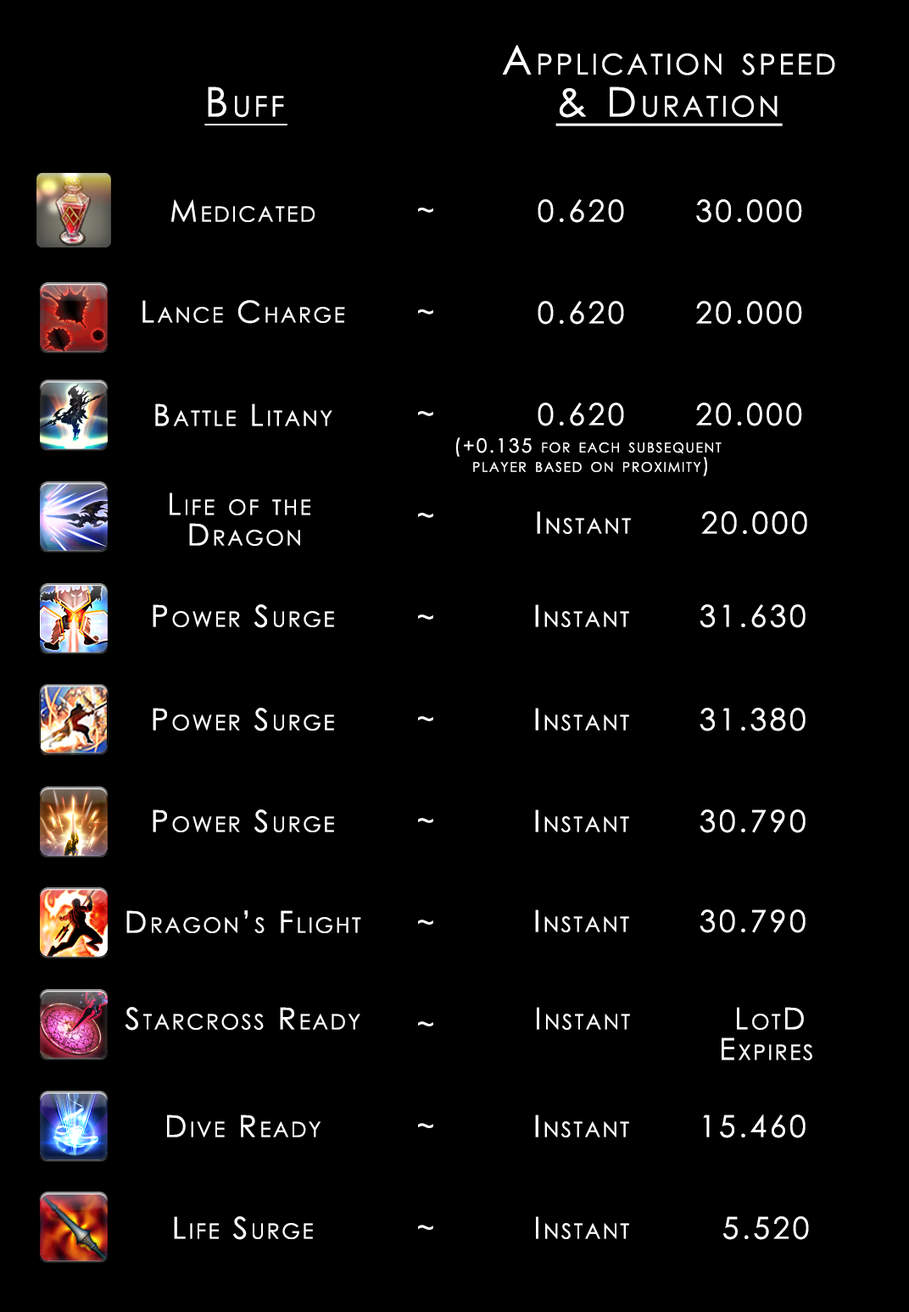
<style>
.page{position:relative;width:909px;height:1312px;background:#000000}
.page>*{position:absolute;margin:0}
.t1{font:40.7px "CenturyGothic";letter-spacing:0.1em;color:#ffffff;font-variant:small-caps}
.t2{font:40.7px "CenturyGothic";letter-spacing:0.1em;color:#ffffff;font-variant:small-caps;text-decoration:underline}
.t3{font:30.1px "CenturyGothic";letter-spacing:0.1em;color:#ffffff;font-variant:small-caps}
.t4{font:30.1px/14.5px "CenturyGothic";letter-spacing:0.1em;color:#ffffff;font-variant:small-caps}
.t5{font:19.2px/19.5px "CenturyGothic";letter-spacing:0.1em;color:#ffffff;font-variant:small-caps}
.t6{font:30.1px/30.5px "CenturyGothic";letter-spacing:0.1em;color:#ffffff;font-variant:small-caps}
</style>
<div class="page">
<p class="t1" style="left:502px;top:45px;width:333px;height:30px">Application speed</p>
<p class="t2" style="left:204px;top:86px;width:83px;height:39px">Buff</p>
<p class="t2" style="left:555px;top:86px;width:227px;height:40px">&amp; Duration</p>
<p class="t3" style="left:171px;top:199px;width:143px;height:23px">Medicated</p>
<p class="t4" style="left:418px;top:208px;width:15px;height:1022px;text-align:center">~<br><br><br><br><br><br><br>~<br><br><br><br><br><br><br>~<br><br><br><br><br><br><br>~<br><br><br><br><br><br><br>~<br><br><br><br><br><br><br>~<br><br><br><br><br><br><br>~<br><br><br><br><br><br><br>~<br><br><br><br><br><br><br>~<br><br><br><br><br><br><br>~<br><br><br><br><br><br><br>~</p>
<p class="t3" style="left:537px;top:199px;width:265px;height:24px">0.620      30.000</p>
<p class="t3" style="left:142px;top:300px;width:203px;height:24px">Lance Charge</p>
<p class="t3" style="left:537px;top:301px;width:265px;height:24px">0.620      20.000</p>
<p class="t3" style="left:155px;top:403px;width:177px;height:23px">Battle Litany</p>
<p class="t3" style="left:537px;top:403px;width:265px;height:23px">0.620      20.000</p>
<p class="t5" style="left:456px;top:437px;width:265px;height:39px;text-align:center">(+0.135 for each subsequent <br>player based on proximity)</p>
<p class="t6" style="left:170px;top:493px;width:140px;height:53px;text-align:center">Life of the <br>Dragon</p>
<p class="t3" style="left:537px;top:511px;width:270px;height:24px">Instant      20.000</p>
<p class="t3" style="left:153px;top:604px;width:181px;height:24px">Power Surge</p>
<p class="t3" style="left:535px;top:604px;width:270px;height:24px">Instant      31.630</p>
<p class="t3" style="left:153px;top:708px;width:181px;height:24px">Power Surge</p>
<p class="t3" style="left:535px;top:708px;width:270px;height:24px">Instant      31.380</p>
<p class="t3" style="left:153px;top:810px;width:181px;height:23px">Power Surge</p>
<p class="t3" style="left:535px;top:810px;width:270px;height:23px">Instant      30.790</p>
<p class="t3" style="left:126px;top:910px;width:235px;height:23px">Dragon’s Flight</p>
<p class="t3" style="left:535px;top:910px;width:270px;height:23px">Instant      30.790</p>
<p class="t3" style="left:125px;top:1007px;width:235px;height:24px">Starcross Ready</p>
<p class="t6" style="left:537px;top:1007px;width:275px;height:53px;text-align:center">Instant         LotD<br>                 Expires</p>
<p class="t3" style="left:167px;top:1115px;width:153px;height:23px">Dive Ready</p>
<p class="t3" style="left:535px;top:1115px;width:270px;height:23px">Instant      15.460</p>
<p class="t3" style="left:174px;top:1216px;width:139px;height:24px">Life Surge</p>
<p class="t3" style="left:536px;top:1216px;width:273px;height:24px">Instant        5.520</p>
</div>
